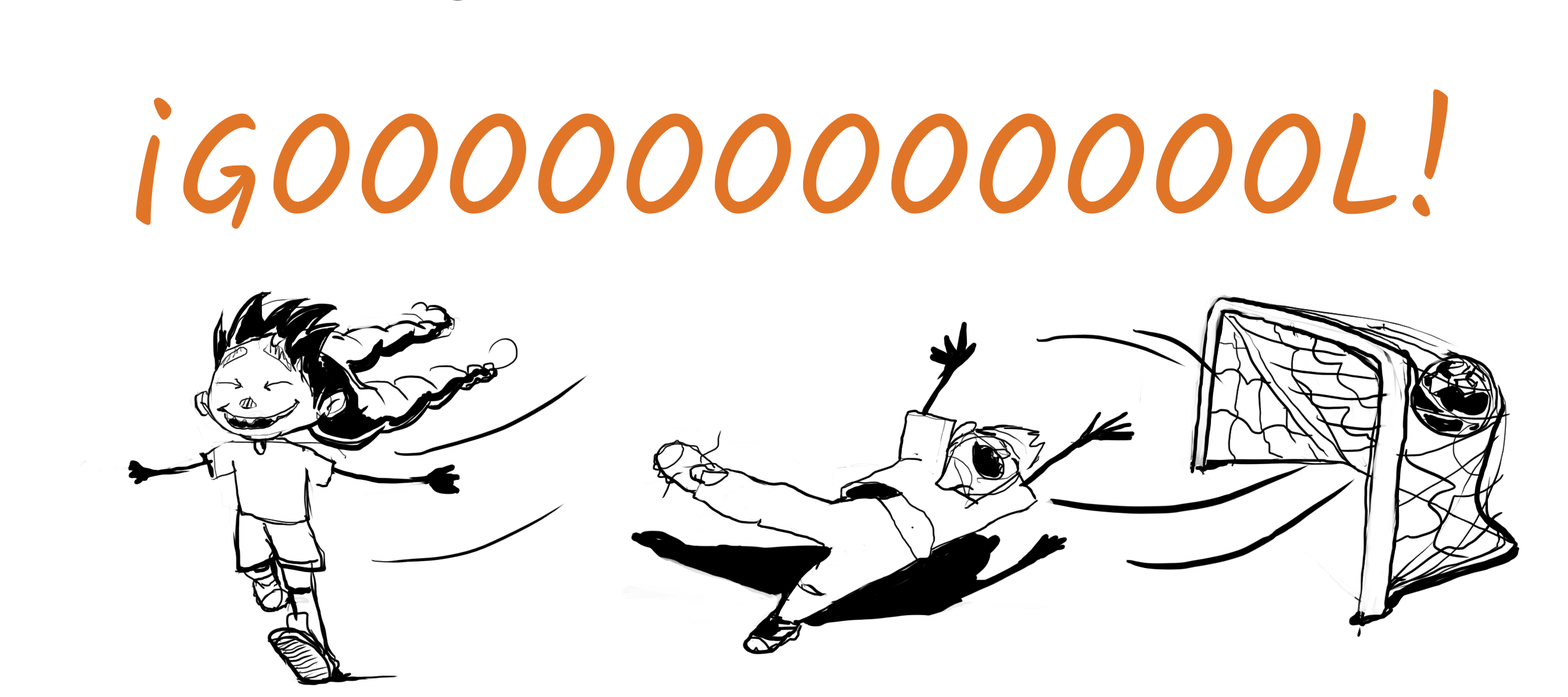
<style>
.page{position:relative;width:1568px;height:697px;background:#ffffff}
.page>*{position:absolute;margin:0}
.t1{font:156.8px "Kalam-Regular";color:#e07527}
</style>
<div class="page">
<p class="t1" style="left:136px;top:89px;width:1312px;height:140px">¡GOOOOOOOOOOOOL!</p>
</div>
